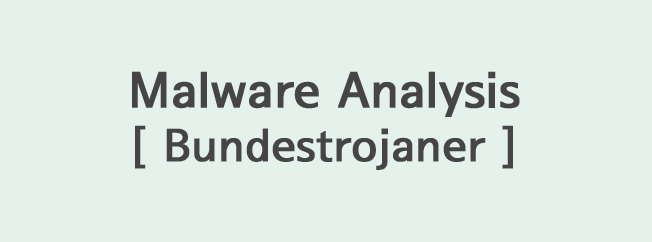
<style>
.page{position:relative;width:652px;height:242px;background:#e4f2eb}
.page>*{position:absolute;margin:0}
.t1{font:45px "SeoulNamsanB";color:#454545;font-weight:bold}
.t2{font:49px "SeoulNamsanB";color:#454545;font-weight:bold}
</style>
<div class="page">
<p class="t1" style="left:132px;top:71px;width:388px;height:99px;text-align:center"><span class="t2">Malware Analysis<br></span>[ Bundestrojaner ]</p>
</div>
